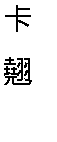
<style>
.page{position:relative;width:57px;height:142px;background:#ffffff}
.page>*{position:absolute;margin:0}
.t1{font:30px "AdobeFanHeitiStd-Bold";color:#000000}
</style>
<div class="page">
<p class="t1" style="left:4px;top:5px;width:28px;height:80px">卡翹</p>
</div>
